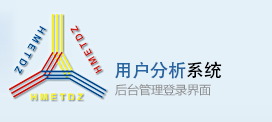
<style>
.page{position:relative;width:272px;height:122px;background:#e4f1f9}
.page>*{position:absolute;margin:0}
.t1{font:18px "SimSun";color:#2866a1}
.t2{font:18px "SimSun";color:#000000}
.t3{font:12px "MicrosoftYaHei";color:#8b8b8b}
</style>
<div class="page">
<p class="t1" style="left:115px;top:61px;width:107px;height:18px">用户分析<span class="t2">系统</span></p>
<p class="t3" style="left:115px;top:83px;width:96px;height:13px">后台管理登录界面</p>
</div>
